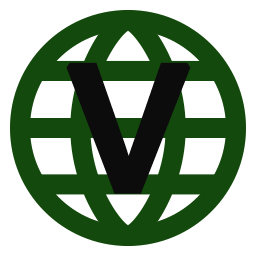
<style>
.page{position:relative;width:256px;height:256px;background:#ffffff}
.page>*{position:absolute;margin:0}
.t1{font:256px "MyriadPro-Regular";color:#0c0c0c;font-weight:bold}
</style>
<div class="page">
<p class="t1" style="left:66px;top:62px;width:125px;height:132px">v</p>
</div>
